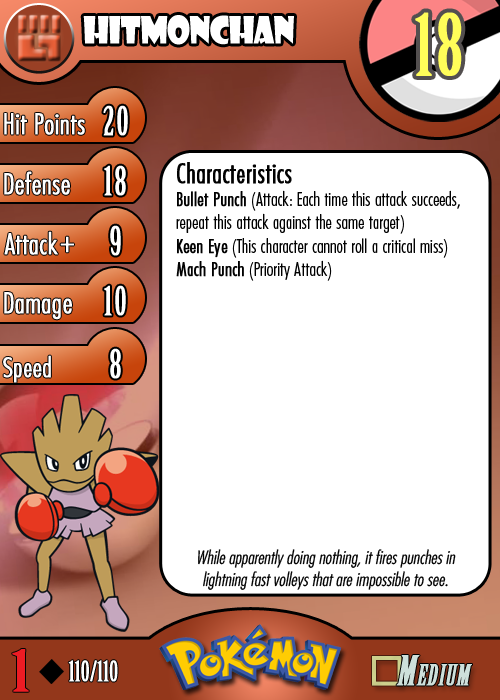
<style>
.page{position:relative;width:500px;height:700px;background:#ffffff}
.page>*{position:absolute;margin:0}
.t1{font:36.7px "ShowcardGothic-Reg";letter-spacing:-0.025em;color:#ffffff;scale:0.91 1}
.t2{font:83.3px "BirchStd";letter-spacing:0.025em;color:#fffd59;font-weight:bold}
.t3{font:27.8px "Futura-CondensedLight";color:#ffffff;font-weight:bold}
.t4{font:38.9px "BirchStd";letter-spacing:0.035em;color:#ffffff;font-weight:bold}
.t5{font:19.4px "FuturaCondensedBQ-Light";color:#010101}
.t6{font:27.8px "FuturaCondensedBQ-Light";color:#010101;font-weight:bold}
.t7{font:19.4px "FuturaCondensedBQ-Light";color:#010101;font-weight:bold}
.t8{font:30.6px "Futura-CondensedLight";color:#ffffff;font-weight:bold}
.t9{font:27.8px "FuturaCondensedBQ-Light";color:#ffffff;font-weight:bold}
.t10{font:18.1px "Futura-CondensedLight";color:#010101;font-style:italic}
.t11{font:55.6px "BirchStd";color:#ed1c24;font-weight:bold;scale:1.5 1}
.t12{font:27.8px "BirchStd";color:#ffffff;font-weight:bold}
</style>
<div class="page">
<p class="t1" style="left:83px;top:15px;width:211px;height:30px">hitmonchan</p>
<p class="t2" style="left:415px;top:12px;width:47px;height:64px">18</p>
<p class="t3" style="left:4px;top:113px;width:81px;height:22px">Hit Points</p>
<p class="t4" style="left:103px;top:105px;width:25px;height:31px">20</p>
<p class="t3" style="left:4px;top:171px;width:66px;height:24px">Defense</p>
<p class="t4" style="left:104px;top:165px;width:22px;height:31px">18</p>
<p class="t5" style="left:176px;top:162px;width:284px;height:119px"><span class="t6">Characteristics<br></span><span class="t7">Bullet Punch</span> (Attack: Each time this attack succeeds, repeat this attack against the same target)<br><span class="t7">Keen Eye</span> (This character cannot roll a critical miss)<br><span class="t7">Mach Punch</span> (Priority Attack)</p>
<p class="t3" style="left:4px;top:231px;width:54px;height:24px">Attack</p>
<p class="t4" style="left:110px;top:225px;width:11px;height:31px">9</p>
<p class="t8" style="left:60px;top:236px;width:14px;height:17px">+</p>
<p class="t3" style="left:4px;top:292px;width:68px;height:28px">Damage</p>
<p class="t4" style="left:104px;top:285px;width:22px;height:31px">10</p>
<p class="t4" style="left:110px;top:348px;width:11px;height:31px">8</p>
<p class="t9" style="left:3px;top:355px;width:48px;height:28px">Speed</p>
<p class="t10" style="left:198px;top:549px;width:258px;height:41px;text-align:center">While apparently doing nothing, it fires punches in lightning fast volleys that are impossible to see.</p>
<p class="t11" style="left:12px;top:649px;width:17px;height:43px">1</p>
<p class="t12" style="left:68px;top:660px;width:50px;height:22px">110/110</p>
</div>
